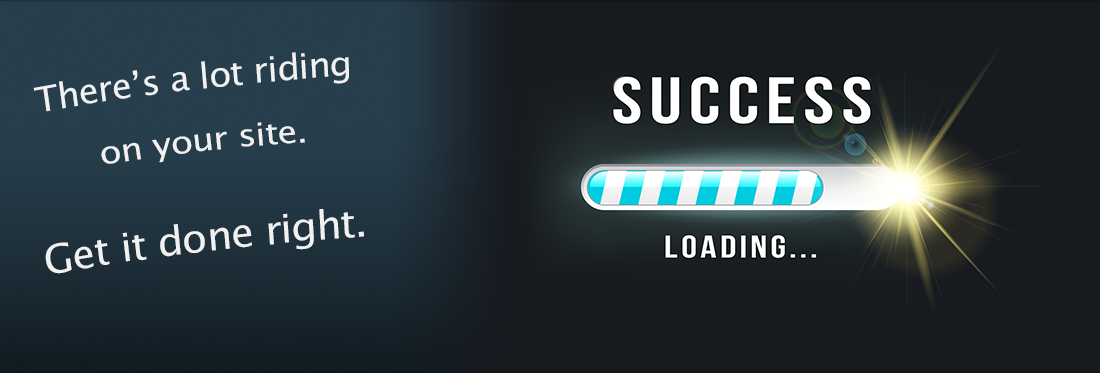
<style>
.page{position:relative;width:1100px;height:373px;background:#171a1f}
.page>*{position:absolute;margin:0}
.t1{font:35.1px "LucidaSansUnicode";letter-spacing:-0.025em;color:#f1f1f1;scale:1.03 1}
.t2{font:31.9px "LucidaSansUnicode";letter-spacing:-0.025em;color:#f1f1f1;scale:1.13 1}
.t3{font:39.6px "LucidaSansUnicode";letter-spacing:-0.025em;color:#f1f1f1;scale:1.04 1}
</style>
<div class="page">
<p class="t1" style="left:33px;top:52px;width:316px;height:60px;rotate:2deg">There’s a lot riding</p>
<p class="t2" style="left:101px;top:122px;width:204px;height:42px;rotate:4deg">on your site.</p>
<p class="t3" style="left:45px;top:209px;width:319px;height:65px;rotate:2deg">Get it done right.</p>
</div>
